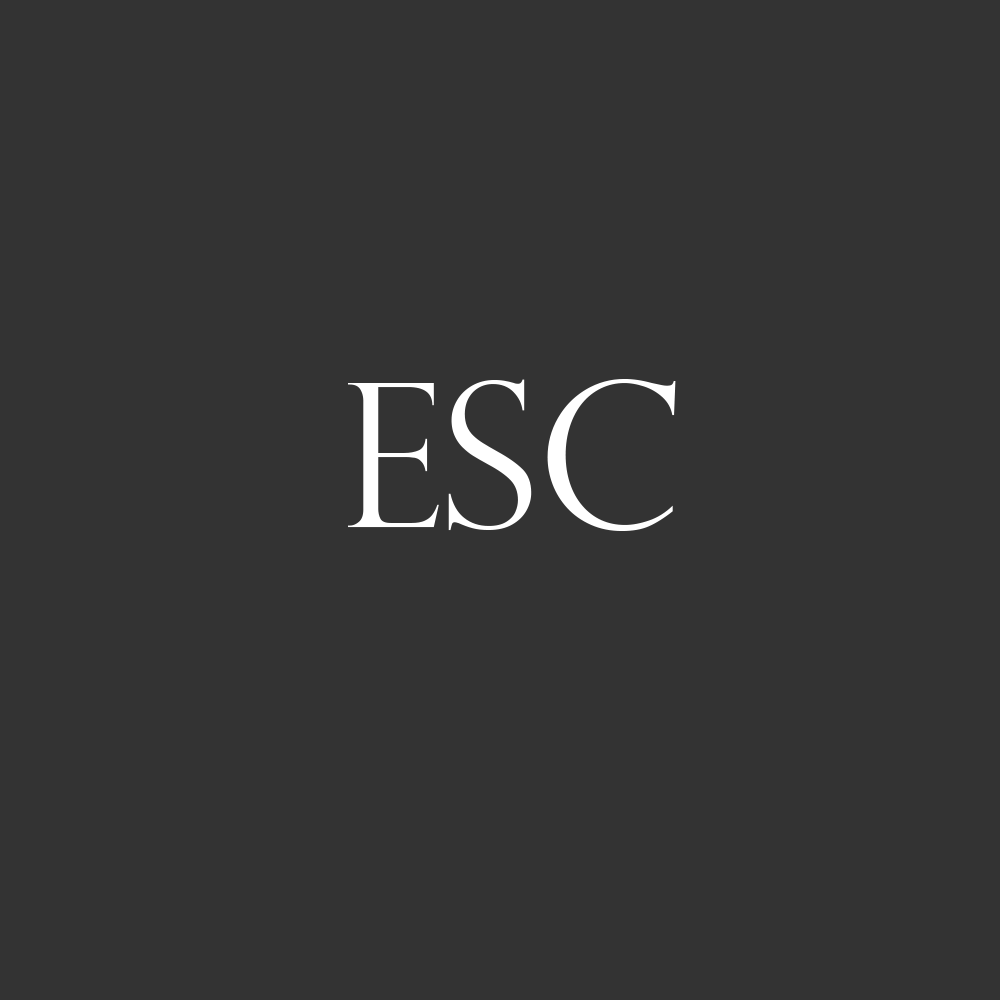
<style>
.page{position:relative;width:1000px;height:1000px;background:#333333}
.page>*{position:absolute;margin:0}
.t1{font:200px "PerpetuaTitlingMT-Light";color:#ffffff}
</style>
<div class="page">
<p class="t1" style="left:348px;top:379px;width:328px;height:152px">ESC</p>
</div>
